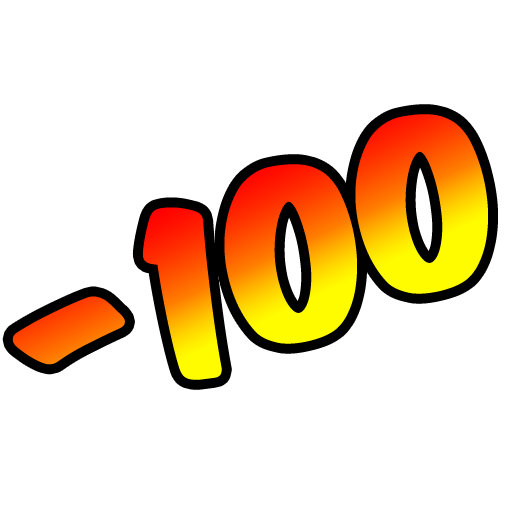
<style>
.page{position:relative;width:512px;height:512px;background:#ffffff}
.page>*{position:absolute;margin:0}
.t1{font:197.9px "KomikaAxis";font-weight:bold}
</style>
<div class="page">
<p class="t1" style="left:12px;top:114px;width:476px;height:266px;rotate:-21deg">-100</p>
</div>
